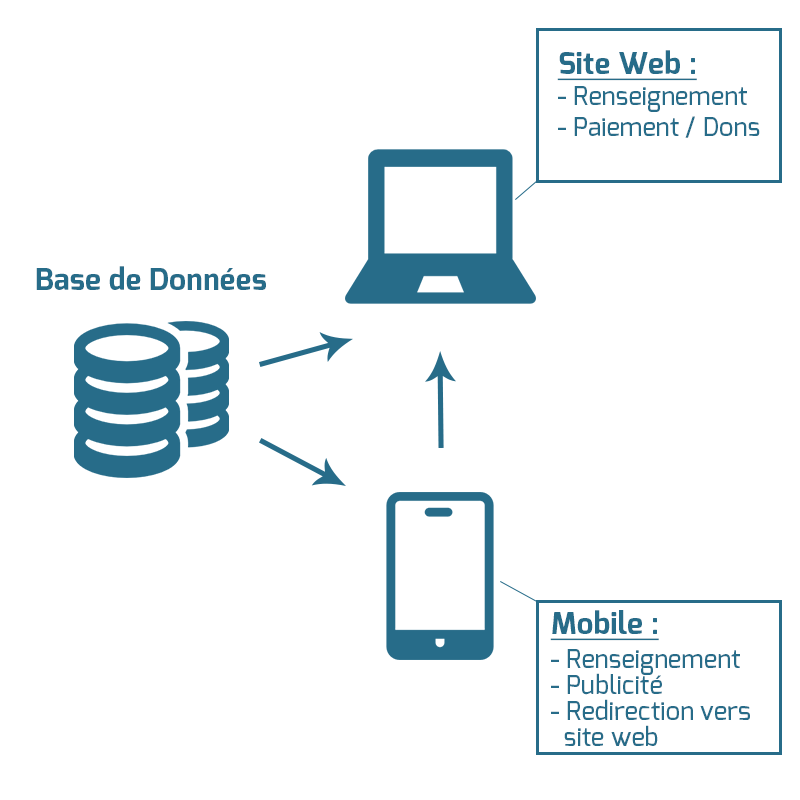
<style>
.page{position:relative;width:800px;height:800px;background:#ffffff}
.page>*{position:absolute;margin:0}
.t1{font:25.4px/31px "Exo-Medium";color:#276c89}
.t2{font:30.5px/20.9px "Exo-Bold";color:#276c89;text-decoration:underline}
.t3{font:30.5px "Exo-Bold";color:#276c89}
.t4{font:25.4px/25.9px "Exo-Medium";color:#276c89}
.t5{font:30.5px/28.5px "Exo-Bold";color:#276c89;text-decoration:underline}
.t6{font:25.4px/33.6px "Exo-Medium";color:#276c89}
</style>
<div class="page">
<p class="t1" style="left:557px;top:50px;width:203px;height:88px"><span class="t2">Site Web :<br></span>- Renseignement<br>- Paiement / Dons</p>
<p class="t3" style="left:36px;top:266px;width:230px;height:24px">Base de Données</p>
<p class="t4" style="left:550px;top:610px;width:200px;height:136px"><span class="t5">Mobile :<br></span>-<span class="t6"> Renseignement<br></span>- Publicité<br>- Redirection vers      site web</p>
</div>
